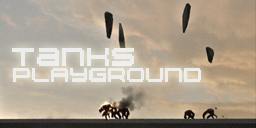
<style>
.page{position:relative;width:256px;height:128px}
.page>*{position:absolute;margin:0}
.t1{font:18px "04b20";color:#ededed}
.t2{font:14px "04b20";color:#ededed}
</style>
<div class="page">
<p class="t1" style="left:12px;top:48px;width:122px;height:18px">TanKs</p>
<p class="t2" style="left:13px;top:68px;width:188px;height:14px">pLAyGRounD</p>
</div>
